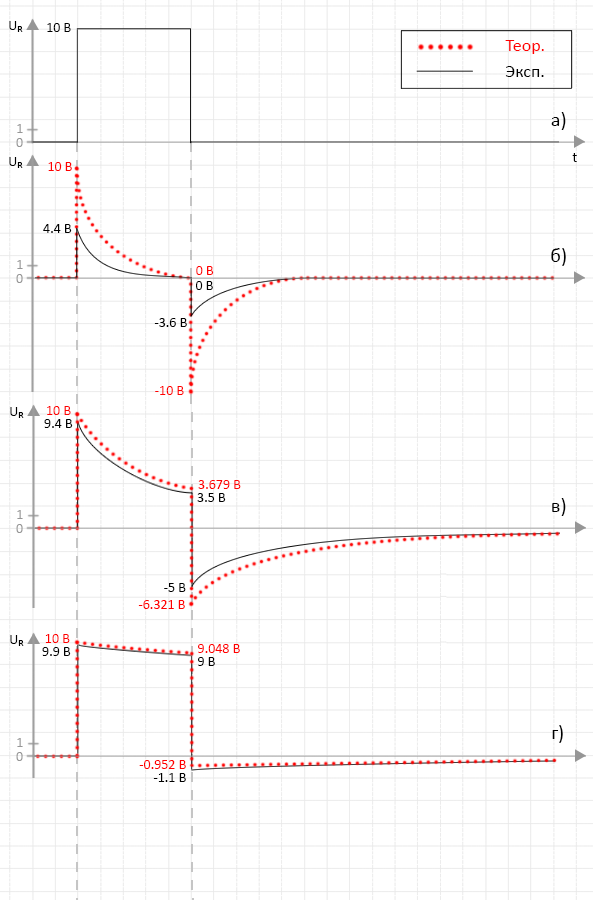
<style>
.page{position:relative;width:593px;height:900px;background:#ffffff}
.page>*{position:absolute;margin:0}
.t1{font:14px "Calibri";color:#000000}
.t2{font:10px "Calibri";color:#000000}
.t3{font:18px "Calibri";color:#ff0000}
.t4{font:18px "Calibri";color:#000000}
.t5{font:20px "Calibri";color:#000000}
.t6{font:14px "Calibri";color:#969696}
.t7{font:14px "Calibri";color:#ff0000}
</style>
<div class="page">
<p class="t1" style="left:9px;top:21px;width:8px;height:9px">U</p>
<p class="t2" style="left:17px;top:26px;width:6px;height:6px">R</p>
<p class="t1" style="left:47px;top:23px;width:24px;height:9px">10 В</p>
<p class="t3" style="left:505px;top:40px;width:39px;height:14px">Теор.</p>
<p class="t4" style="left:505px;top:66px;width:39px;height:11px">Эксп.</p>
<p class="t5" style="left:551px;top:112px;width:15px;height:18px">а)</p>
<p class="t6" style="left:17px;top:124px;width:6px;height:9px">1</p>
<p class="t6" style="left:16px;top:138px;width:7px;height:9px">0</p>
<p class="t1" style="left:9px;top:157px;width:8px;height:9px">U</p>
<p class="t1" style="left:572px;top:153px;width:5px;height:9px">t</p>
<p class="t2" style="left:17px;top:162px;width:6px;height:6px">R</p>
<p class="t7" style="left:48px;top:162px;width:24px;height:9px">10 В</p>
<p class="t1" style="left:43px;top:224px;width:29px;height:9px">4.4 В</p>
<p class="t5" style="left:551px;top:248px;width:15px;height:18px">б)</p>
<p class="t6" style="left:17px;top:260px;width:6px;height:9px">1</p>
<p class="t7" style="left:196px;top:266px;width:18px;height:9px">0 В</p>
<p class="t6" style="left:16px;top:274px;width:7px;height:9px">0</p>
<p class="t1" style="left:196px;top:281px;width:17px;height:9px">0 В</p>
<p class="t1" style="left:154px;top:318px;width:33px;height:9px">-3.6 В</p>
<p class="t7" style="left:155px;top:386px;width:29px;height:9px">-10 В</p>
<p class="t1" style="left:10px;top:407px;width:8px;height:9px">U</p>
<p class="t2" style="left:18px;top:412px;width:6px;height:6px">R</p>
<p class="t7" style="left:47px;top:406px;width:24px;height:9px">10 В</p>
<p class="t1" style="left:44px;top:419px;width:29px;height:9px">9.4 В</p>
<p class="t7" style="left:198px;top:480px;width:43px;height:9px">3.679 В</p>
<p class="t1" style="left:197px;top:493px;width:29px;height:9px">3.5 В</p>
<p class="t6" style="left:17px;top:510px;width:6px;height:9px">1</p>
<p class="t5" style="left:552px;top:498px;width:14px;height:18px">в)</p>
<p class="t6" style="left:16px;top:524px;width:7px;height:9px">0</p>
<p class="t1" style="left:164px;top:583px;width:22px;height:9px">-5 В</p>
<p class="t7" style="left:138px;top:600px;width:47px;height:9px">-6.321 В</p>
<p class="t1" style="left:10px;top:635px;width:8px;height:9px">U</p>
<p class="t2" style="left:18px;top:640px;width:6px;height:6px">R</p>
<p class="t7" style="left:45px;top:634px;width:25px;height:9px">10 В</p>
<p class="t1" style="left:42px;top:647px;width:29px;height:9px">9.9 В</p>
<p class="t7" style="left:198px;top:644px;width:42px;height:9px">9.048 В</p>
<p class="t1" style="left:198px;top:657px;width:17px;height:9px">9 В</p>
<p class="t5" style="left:552px;top:725px;width:11px;height:18px">г)</p>
<p class="t6" style="left:17px;top:738px;width:6px;height:9px">1</p>
<p class="t6" style="left:16px;top:752px;width:7px;height:9px">0</p>
<p class="t7" style="left:139px;top:760px;width:47px;height:9px">-0.952 В</p>
<p class="t1" style="left:153px;top:773px;width:33px;height:9px">-1.1 В</p>
</div>
